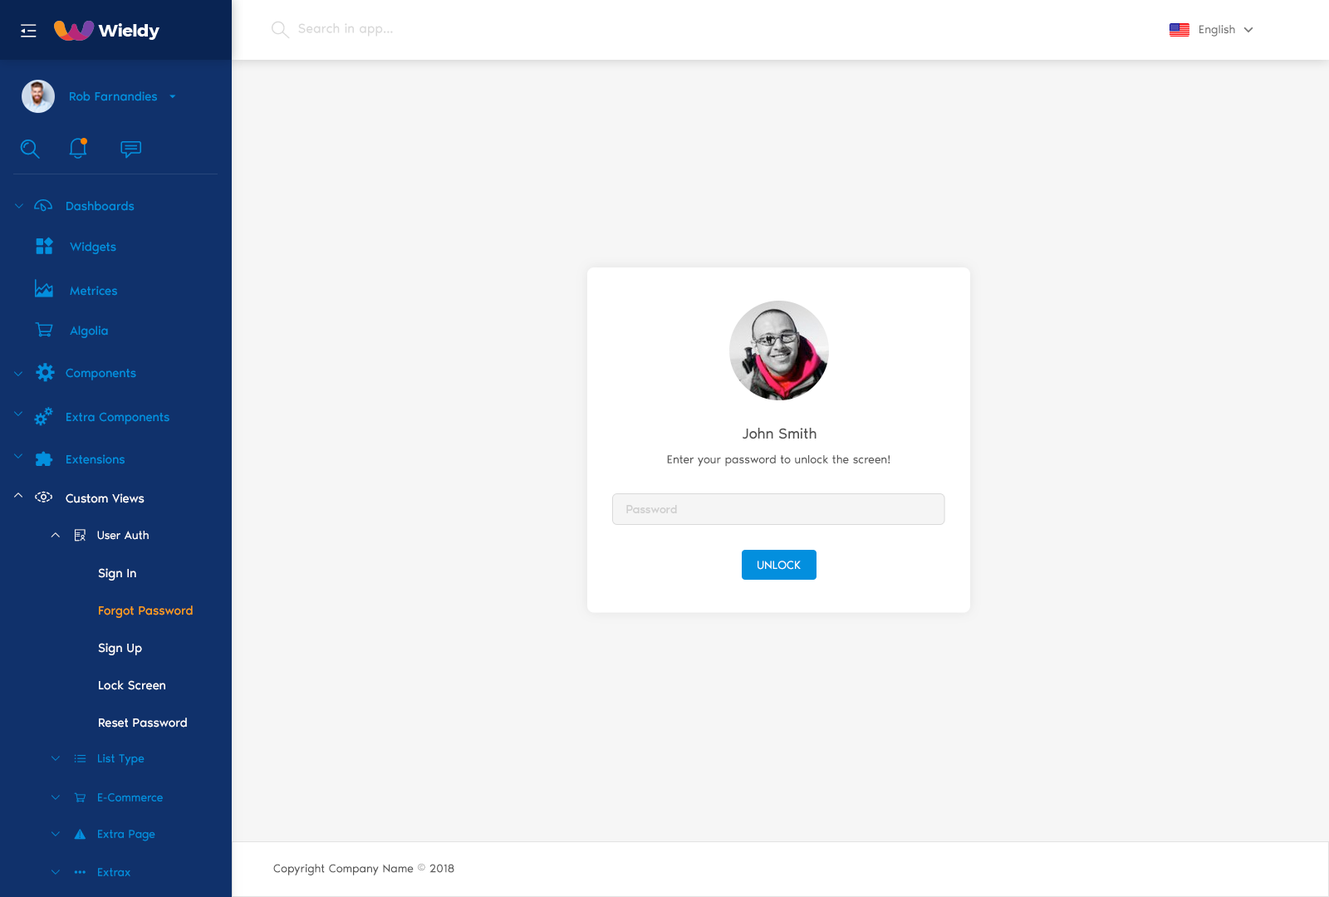
<style>
.page{position:relative;width:1329px;height:897px;background:#f6f6f6}
.page>*{position:absolute;margin:0}
.t1{font:13.3px "NoirPro-Regular";color:#d9d9d9}
.t2{font:11.6px "NoirPro-Regular";color:#757575}
.t3{font:12.5px "NoirPro-Regular";color:#038fde}
.t4{font:10px "gaxonant"}
.t5{font:18.3px "gaxonant";color:#038fde}
.t6{font:9.7px "gaxonant";color:#038fde}
.t7{font:15px "NoirPro-Regular";color:#535353}
.t8{font:11.6px "NoirPro-Regular";color:#595959}
.t9{font:18.3px "gaxonant";color:#ffffff}
.t10{font:12.5px "NoirPro-Regular";color:#ffffff}
.t11{font:11.6px "NoirPro-Regular";color:#cfcfcf}
.t12{font:10px "gaxonant";color:#ffffff}
.t13{font:11.6px "gaxonant";color:#ffffff}
.t14{font:11.6px "NoirPro-Regular";color:#ffffff}
.t15{font:12.5px/33.2px "NoirPro-Regular";color:#ffffff}
.t16{font:12.5px/33.2px "NoirPro-Regular";color:#fe9e15}
.t17{font:11.6px "NoirPro-Regular";color:#ffffff;text-transform:uppercase}
.t18{font:10px "gaxonant";color:#038fde}
.t19{font:11.6px "gaxonant";color:#038fde}
.t20{font:11.6px "NoirPro-Regular";color:#038fde}
</style>
<div class="page">
<p class="t1" style="left:298px;top:23px;width:95px;height:14px">Search in app...</p>
<p class="t2" style="left:1200px;top:25px;width:35px;height:12px">English</p>
<p class="t3" style="left:70px;top:91px;width:87px;height:10px">Rob Farnandies</p>
<p class="t4" style="left:15px;top:204px;width:8px;height:5px">2</p>
<p class="t5" style="left:34px;top:199px;width:18px;height:13px">-</p>
<p class="t3" style="left:66px;top:201px;width:69px;height:10px">Dashboards</p>
<p class="t3" style="left:70px;top:242px;width:46px;height:12px">Widgets</p>
<p class="t5" style="left:35px;top:279px;width:18px;height:18px">m</p>
<p class="t3" style="left:70px;top:286px;width:47px;height:10px">Metrices</p>
<p class="t3" style="left:70px;top:326px;width:38px;height:12px">Algolia</p>
<p class="t5" style="left:36px;top:363px;width:19px;height:19px">%</p>
<p class="t6" style="left:14px;top:371px;width:8px;height:5px">2</p>
<p class="t3" style="left:66px;top:368px;width:70px;height:12px">Components</p>
<p class="t6" style="left:14px;top:411px;width:8px;height:5px">2</p>
<p class="t3" style="left:66px;top:412px;width:103px;height:12px">Extra Components</p>
<p class="t7" style="left:742px;top:428px;width:75px;height:11px">John Smith</p>
<p class="t6" style="left:14px;top:454px;width:8px;height:5px">2</p>
<p class="t3" style="left:66px;top:454px;width:59px;height:10px">Extensions</p>
<p class="t8" style="left:667px;top:454px;width:224px;height:13px">Enter your password to unlock the screen!</p>
<p class="t4" style="left:14px;top:493px;width:8px;height:5px">5</p>
<p class="t9" style="left:35px;top:491px;width:17px;height:12px">,</p>
<p class="t10" style="left:66px;top:493px;width:79px;height:10px">Custom Views</p>
<p class="t11" style="left:626px;top:505px;width:51px;height:8px">Password</p>
<p class="t12" style="left:51px;top:532px;width:9px;height:5px">5</p>
<p class="t13" style="left:75px;top:529px;width:11px;height:13px">r</p>
<p class="t14" style="left:97px;top:531px;width:52px;height:9px">User Auth</p>
<p class="t15" style="left:98px;top:568px;width:95px;height:160px">Sign In<br><span class="t16">Forgot Password<br></span>Sign Up<br>Lock Screen<br>Reset Password</p>
<p class="t17" style="left:758px;top:561px;width:43px;height:9px">Unlock</p>
<p class="t18" style="left:52px;top:756px;width:8px;height:5px">2</p>
<p class="t19" style="left:74px;top:754px;width:12px;height:9px">h</p>
<p class="t20" style="left:98px;top:754px;width:47px;height:12px">List Type</p>
<p class="t18" style="left:52px;top:795px;width:8px;height:5px">2</p>
<p class="t20" style="left:98px;top:793px;width:65px;height:9px">E-Commerce</p>
<p class="t18" style="left:52px;top:832px;width:8px;height:5px">2</p>
<p class="t19" style="left:74px;top:829px;width:12px;height:11px">~</p>
<p class="t20" style="left:98px;top:830px;width:57px;height:12px">Extra Page</p>
<p class="t18" style="left:52px;top:870px;width:8px;height:5px">2</p>
<p class="t20" style="left:98px;top:868px;width:32px;height:8px">Extrax</p>
<p class="t8" style="left:273px;top:864px;width:181px;height:12px">Copyright Company Name © 2018</p>
<p class="t19" style="left:74px;top:871px;width:12px;height:3px">{</p>
</div>
